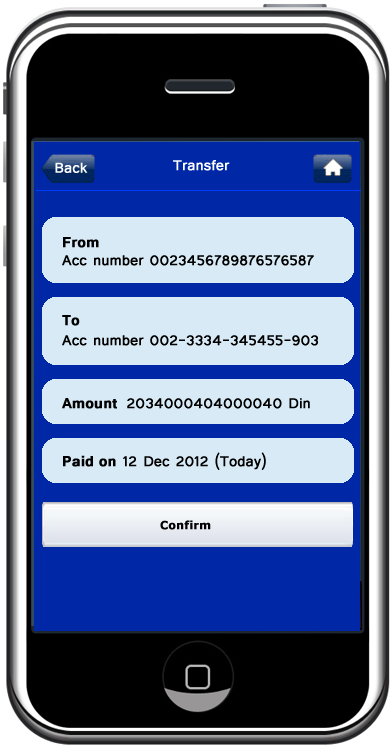
<style>
.page{position:relative;width:390px;height:747px;background:#0027a6}
.page>*{position:absolute;margin:0}
.t1{font:18px "Tunga";color:#ffffff;font-weight:bold}
.t2{font:18px/18px "Tunga";color:#000000;font-weight:bold}
.t3{font:18px/48px "Tunga-Bold";color:#000000;font-weight:bold}
.t4{font:18px/20px "Tunga";color:#000000;font-weight:bold}
.t5{font:18px/20px "Tunga-Bold";color:#000000;font-weight:bold}
.t6{font:18px/58px "Tunga";color:#000000;font-weight:bold}
.t7{font:18px/58px "Tunga-Bold";color:#000000;font-weight:bold}
.t8{font:11px "Verdana-Bold";color:#000000;font-weight:bold}
</style>
<div class="page">
<p class="t1" style="left:173px;top:160px;width:57px;height:11px">Transfer</p>
<p class="t1" style="left:55px;top:162px;width:33px;height:11px">Back</p>
<p class="t2" style="left:62px;top:237px;width:252px;height:29px"><span class="t3">From<br></span>Acc number 0023456789876576587</p>
<p class="t4" style="left:62px;top:315px;width:256px;height:31px"><span class="t5">To<br></span>Acc number 002-3334-345455-903</p>
<p class="t6" style="left:62px;top:398px;width:248px;height:72px"><span class="t7">Amount  </span>2034000404000040 Din<br><span class="t7">Paid on</span> 12 Dec 2012 (Today)</p>
<p class="t8" style="left:160px;top:520px;width:51px;height:10px">Confirm</p>
</div>
